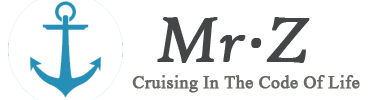
<style>
.page{position:relative;width:370px;height:100px;background:#ffffff}
.page>*{position:absolute;margin:0}
.t1{font:67px "HighTowerText-Italic";color:#434546;font-weight:bold}
.t2{font:22px "Aparajita";color:#666964;font-weight:bold}
</style>
<div class="page">
<p class="t1" style="left:157px;top:17px;width:153px;height:46px">Mr·Z</p>
<p class="t2" style="left:132px;top:75px;width:228px;height:18px">Cruising In The Code Of Life</p>
</div>
